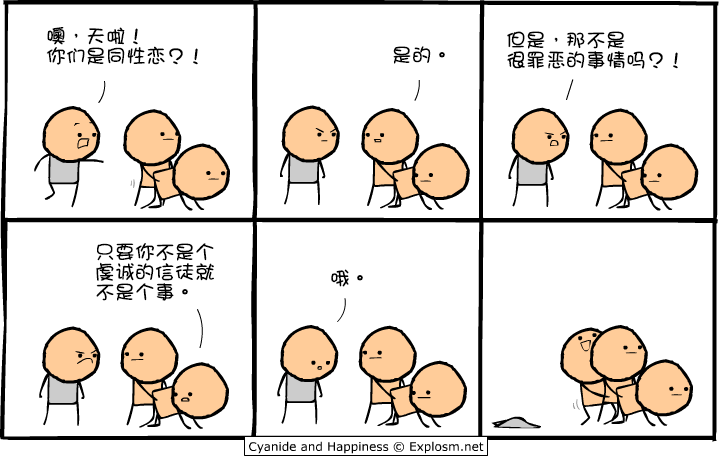
<style>
.page{position:relative;width:720px;height:465px;background:#ffffff}
.page>*{position:absolute;margin:0}
.t1{font:20px/20px "DFGirl";color:#000000}
.t2{font:20px "DFGirl";color:#000000}
</style>
<div class="page">
<p class="t1" style="left:46px;top:27px;width:152px;height:38px">噢，天啦！<br>你们是同性恋？！</p>
<p class="t1" style="left:507px;top:31px;width:171px;height:38px">但是，那不是<br>很罪恶的事情吗？！</p>
<p class="t2" style="left:393px;top:46px;width:52px;height:18px">是的。</p>
<p class="t1" style="left:96px;top:243px;width:118px;height:58px">只要你不是个<br>虔诚的信徒就<br>不是个事。</p>
<p class="t2" style="left:331px;top:269px;width:32px;height:18px">哦。</p>
</div>
